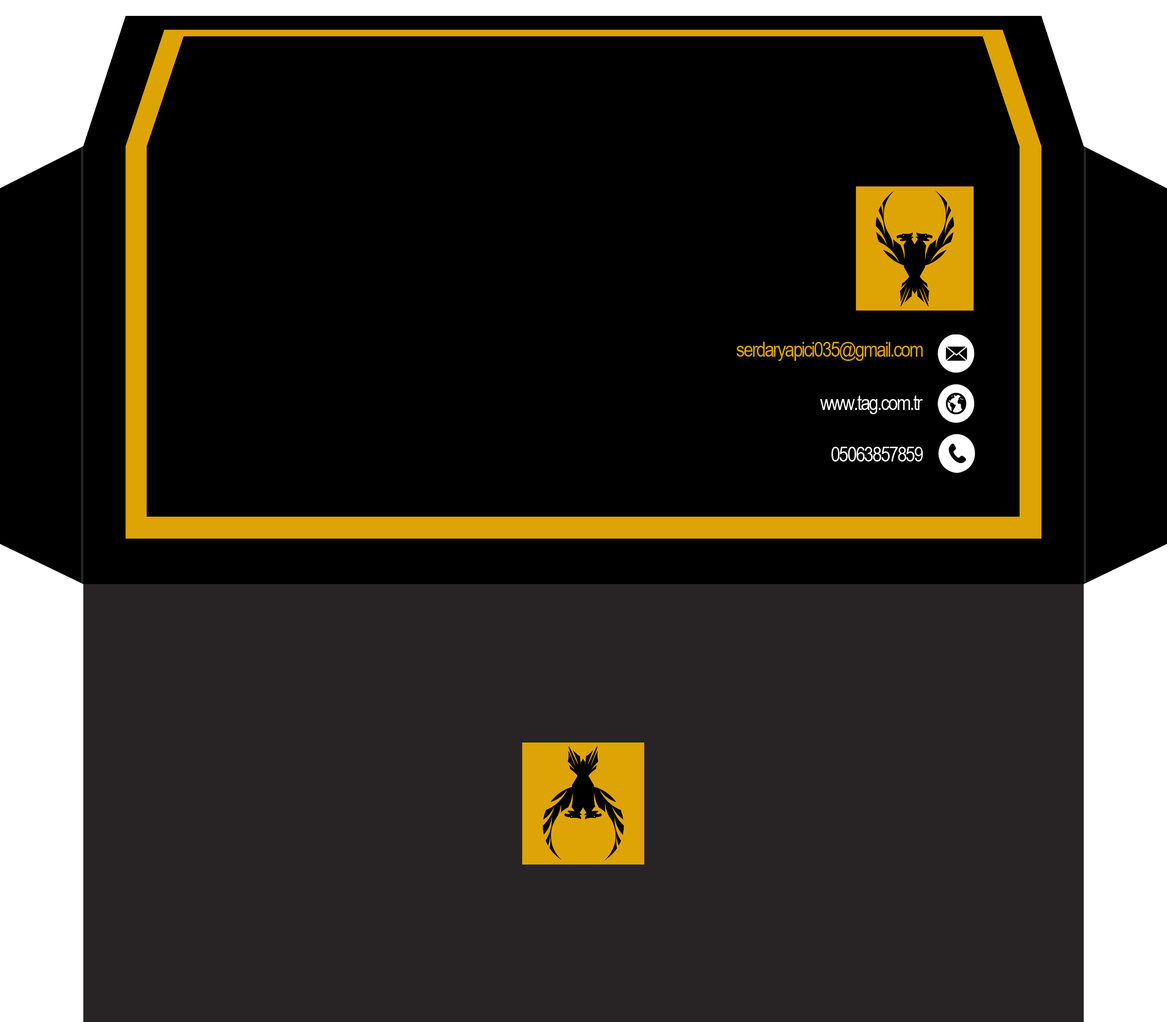
<style>
.page{position:relative;width:1167px;height:1022px;background:#000000}
.page>*{position:absolute;margin:0}
.t1{font:20.3px "DokChampa";letter-spacing:-0.075em;color:#dea304;scale:0.85 1}
.t2{font:20.3px "DokChampa";letter-spacing:-0.075em;color:#ffffff;scale:0.85 1}
.t3{font:20.3px "DokChampa";letter-spacing:-0.075em;color:#fbfbfb;scale:0.85 1}
</style>
<div class="page">
<p class="t1" style="left:737px;top:342px;width:186px;height:19px">serdaryapici035@gmail.com</p>
<p class="t2" style="left:820px;top:395px;width:103px;height:19px">www.tag.com.tr</p>
<p class="t3" style="left:832px;top:447px;width:91px;height:14px">05063857859</p>
</div>
